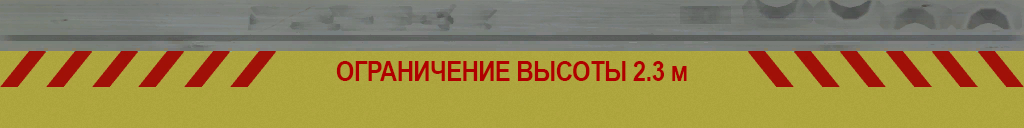
<style>
.page{position:relative;width:1024px;height:128px}
.page>*{position:absolute;margin:0}
.t1{font:27px "Arial-BoldMT";letter-spacing:-0.02em;color:#b00000;scale:0.88 1}
</style>
<div class="page">
<p class="t1" style="left:336px;top:61px;width:351px;height:20px">ОГРАНИЧЕНИЕ ВЫСОТЫ 2.3 м</p>
</div>
